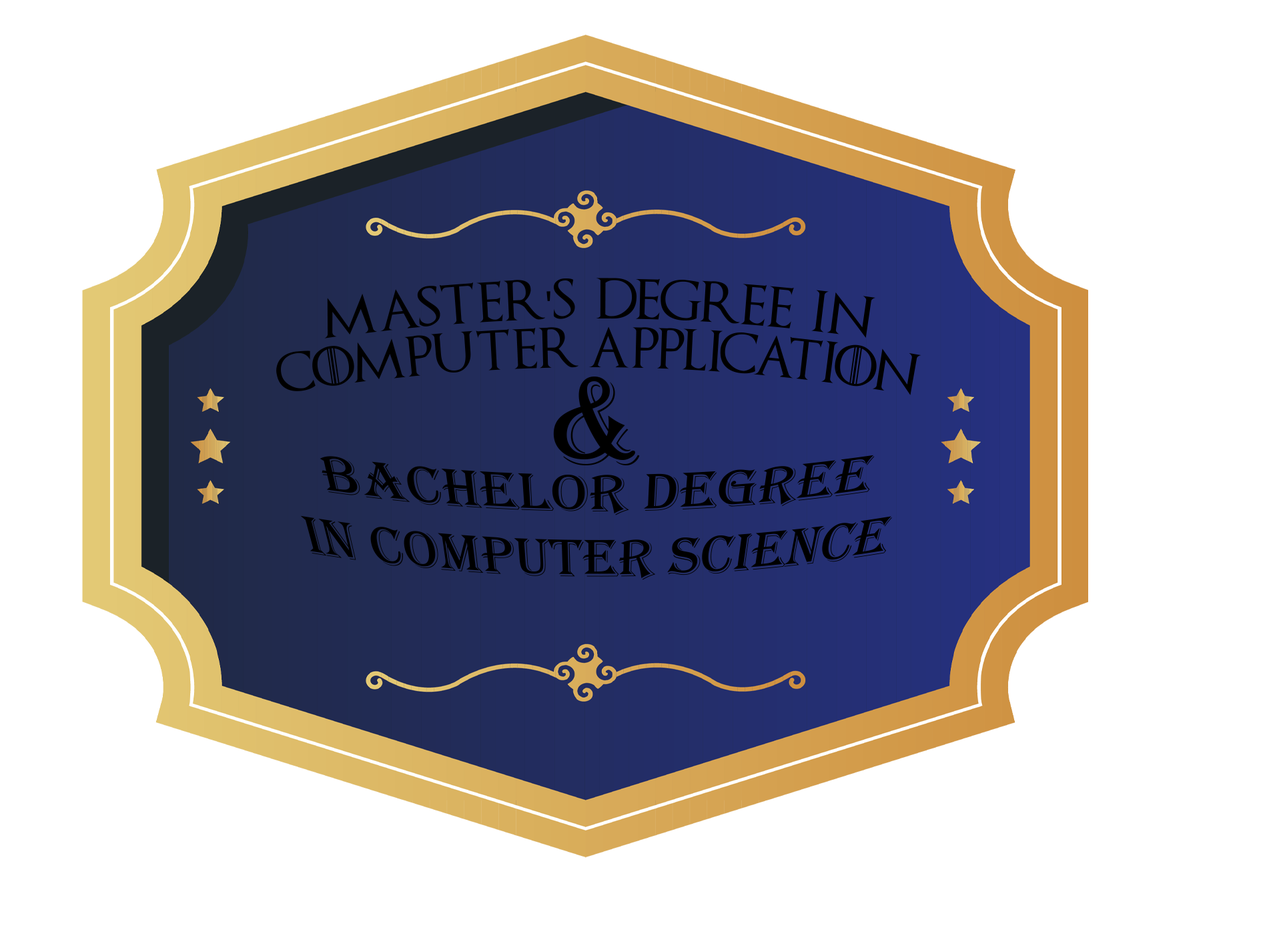
<style>
.page{position:relative;width:1261px;height:946px;background:#ffffff}
.page>*{position:absolute;margin:0}
.t1{font:40.6px "GameofThrones";color:#000000}
.t2{font:40.6px "MyriadPro-Regular";color:#000000}
.t3{font:129.7px "Algerian";color:#000000}
.t4{font:56.5px "Algerian";color:#000000}
</style>
<div class="page">
<p class="t1" style="left:276px;top:278px;width:645px;height:117px;text-align:center">Master<span class="t2">'</span>s  degree  in <br>Computer application</p>
<p class="t3" style="left:553px;top:376px;width:87px;height:89px">&amp;</p>
<p class="t4" style="left:300px;top:454px;width:592px;height:126px;text-align:center">Bachelor degree<br>IN Computer science</p>
</div>
